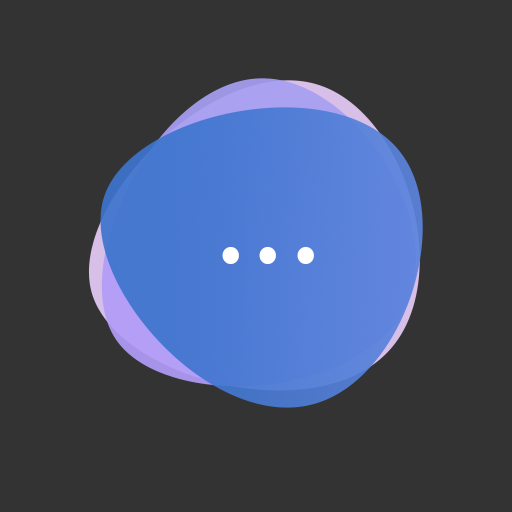
<style>
.page{position:relative;width:512px;height:512px;background:#333333}
.page>*{position:absolute;margin:0}
.t1{font:150px "TimesNewRomanPSMT";color:#ffffff}
</style>
<div class="page">
<p class="t1" style="left:222px;top:247px;width:92px;height:17px">...</p>
</div>
